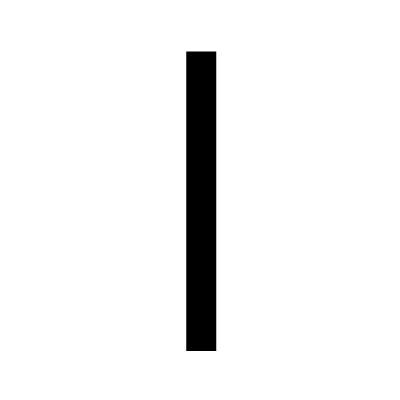
<style>
.page{position:relative;width:400px;height:400px;background:#ffffff}
.page>*{position:absolute;margin:0}
.t1{font:416.7px "CenturyGothic";color:#000000}
</style>
<div class="page">
<p class="t1" style="left:186px;top:51px;width:31px;height:300px">I</p>
</div>
